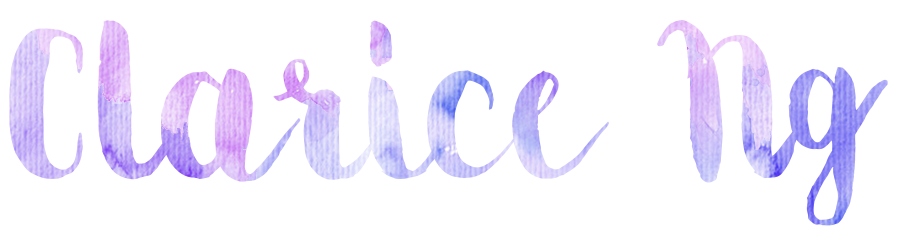
<style>
.page{position:relative;width:897px;height:234px;background:#ffffff}
.page>*{position:absolute;margin:0}
.t1{font:252px "MovusBrushPen"}
</style>
<div class="page">
<p class="t1" style="left:9px;top:19px;width:879px;height:207px">Clarice Ng</p>
</div>
